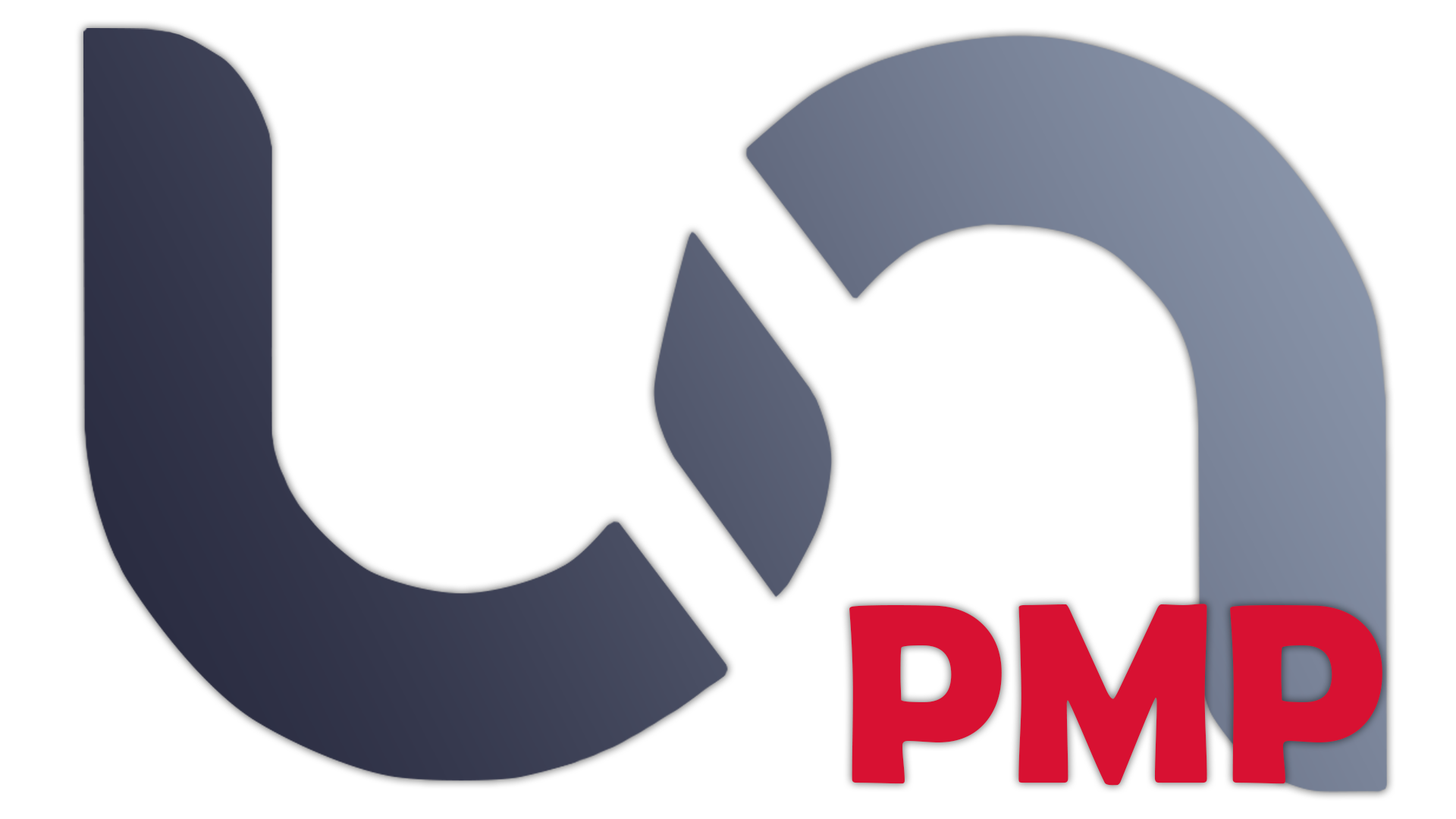
<style>
.page{position:relative;width:1456px;height:819px;background:#ffffff}
.page>*{position:absolute;margin:0}
.t1{font:258.9px "BerlinSansFBDemi-Bold";color:#d81132}
</style>
<div class="page">
<p class="t1" style="left:849px;top:604px;width:533px;height:182px">PMP</p>
</div>
